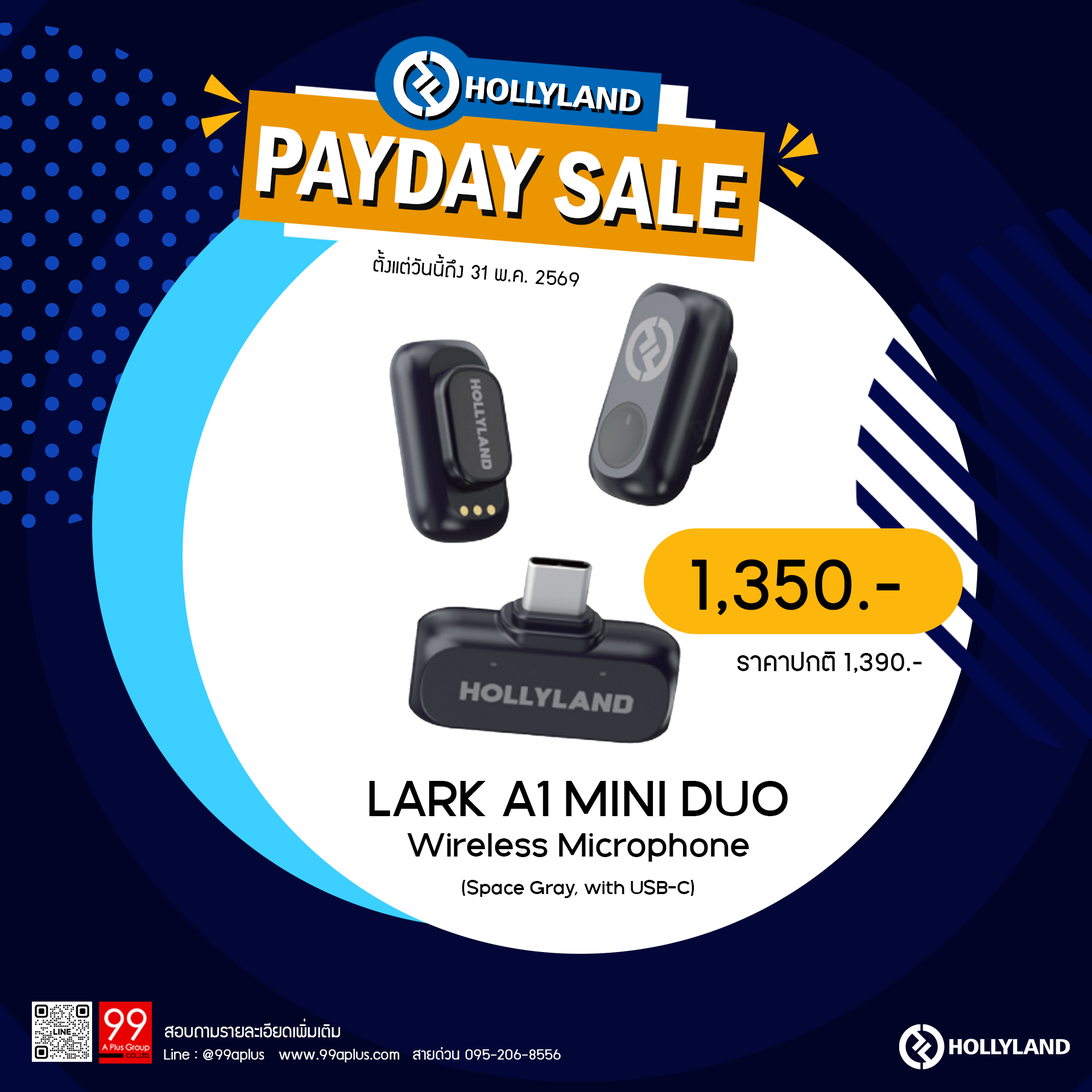
<style>
.page{position:relative;width:1092px;height:1092px;background:#ffffff}
.page>*{position:absolute;margin:0}
.t1{font:97.5px "FranklinGothic-DemiCond";color:#ffffff}
.t2{font:97.5px "FranklinGothic-DemiCond"}
.t3{font:23.2px "supermarket";color:#000000}
.t4{font:83.5px "PK-NakhonPathom-Demo";color:#000000}
.t5{font:30.3px "PK-NakhonPathom-Demo";color:#000000}
.t6{font:54px "GalakPro-Demo";color:#000000}
.t7{font:35.6px "GalakPro-Demo";color:#000000}
.t8{font:20.4px "GalakPro-Demo";color:#000000}
.t9{font:19.8px "supermarket";color:#ffffff}
.t10{font:17.2px "supermarket";color:#ffffff}
</style>
<div class="page">
<p class="t1" style="left:255px;top:126px;width:489px;height:105px;rotate:5deg">PAYDAY SALE</p>
<p class="t2" style="left:259px;top:133px;width:489px;height:104px;rotate:5deg">PAYDAY SALE</p>
<p class="t3" style="left:373px;top:250px;width:206px;height:37px;rotate:4deg">ตั้งแต่วันนี้ถึง 31 พ.ค. 2569</p>
<p class="t4" style="left:692px;top:559px;width:208px;height:56px">1,350.-</p>
<p class="t5" style="left:737px;top:651px;width:185px;height:22px">ราคาปกติ 1,390.-</p>
<p class="t6" style="left:369px;top:781px;width:419px;height:35px">LARK A1 MINI DUO</p>
<p class="t7" style="left:407px;top:833px;width:342px;height:29px">Wireless Microphone</p>
<p class="t8" style="left:462px;top:880px;width:232px;height:18px">(Space Gray, with USB-C)</p>
<p class="t9" style="left:165px;top:1019px;width:175px;height:18px">สอบถามรายละเอียดเพิ่มเติม</p>
<p class="t10" style="left:164px;top:1049px;width:235px;height:13px">Line : @99aplus   www.99aplus.com</p>
<p class="t10" style="left:413px;top:1047px;width:148px;height:13px">สายด่วน 095-206-8556</p>
</div>
